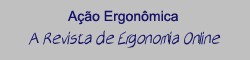
<style>
.page{position:relative;width:250px;height:60px;background:#c0c0c0}
.page>*{position:absolute;margin:0}
.t1{font:14px "ArialMT";color:#151369}
.t2{font:18px "AirCutLight";color:#151369}
</style>
<div class="page">
<p class="t1" style="left:67px;top:10px;width:111px;height:15px">Ação Ergonômica</p>
<p class="t2" style="left:28px;top:30px;width:193px;height:18px">A Revista de Ergonomia Online</p>
</div>
